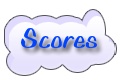
<style>
.page{position:relative;width:120px;height:80px;background:#ffffff}
.page>*{position:absolute;margin:0}
.t1{font:30px "BiffoMTStd";color:#0144ff}
</style>
<div class="page">
<p class="t1" style="left:21px;top:28px;width:76px;height:20px">Scores</p>
</div>
